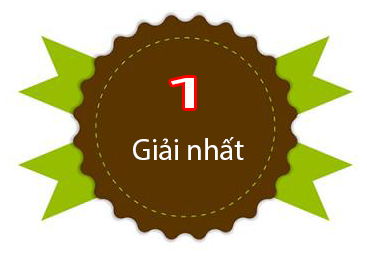
<style>
.page{position:relative;width:367px;height:259px;background:#ffffff}
.page>*{position:absolute;margin:0}
.t1{font:45.6px "MyriadPro-Regular";color:#ffffff;scale:2.32 1}
.t2{font:30px "MyriadPro-Regular";color:#ffffff}
</style>
<div class="page">
<p class="t1" style="left:171px;top:78px;width:23px;height:30px">1</p>
<p class="t2" style="left:133px;top:137px;width:111px;height:23px">Giải nhất</p>
</div>
